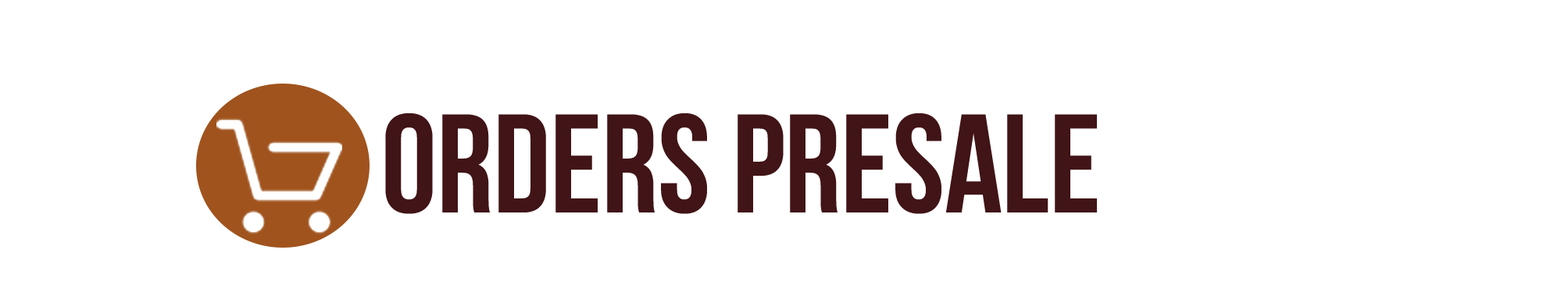
<style>
.page{position:relative;width:1568px;height:282px;background:#ffffff}
.page>*{position:absolute;margin:0}
.t1{font:140px "BebasNeueBold";color:#411417}
</style>
<div class="page">
<p class="t1" style="left:385px;top:113px;width:712px;height:101px">OrdeRs presale</p>
</div>
